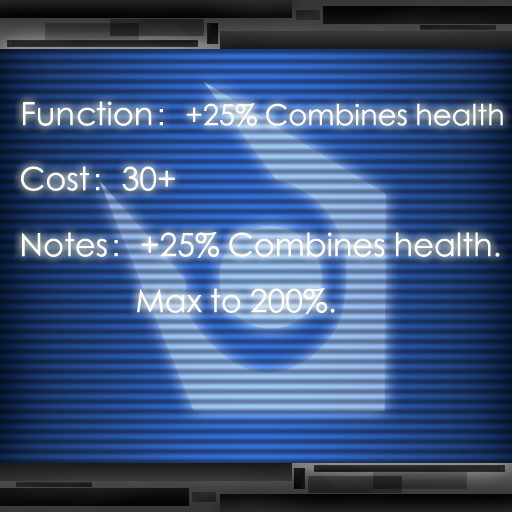
<style>
.page{position:relative;width:512px;height:512px}
.page>*{position:absolute;margin:0}
.t1{font:29px "STXihei";color:#ffffff}
.t2{font:32px "STXihei";color:#ffffff}
</style>
<div class="page">
<p class="t1" style="left:23px;top:101px;width:480px;height:26px"><span class="t2">Function：</span>+25% Combines health</p>
<p class="t2" style="left:21px;top:166px;width:154px;height:25px">Cost：30+</p>
<p class="t2" style="left:22px;top:232px;width:478px;height:82px">Notes：+25% Combines health.<br>    Max to 200%.</p>
</div>
